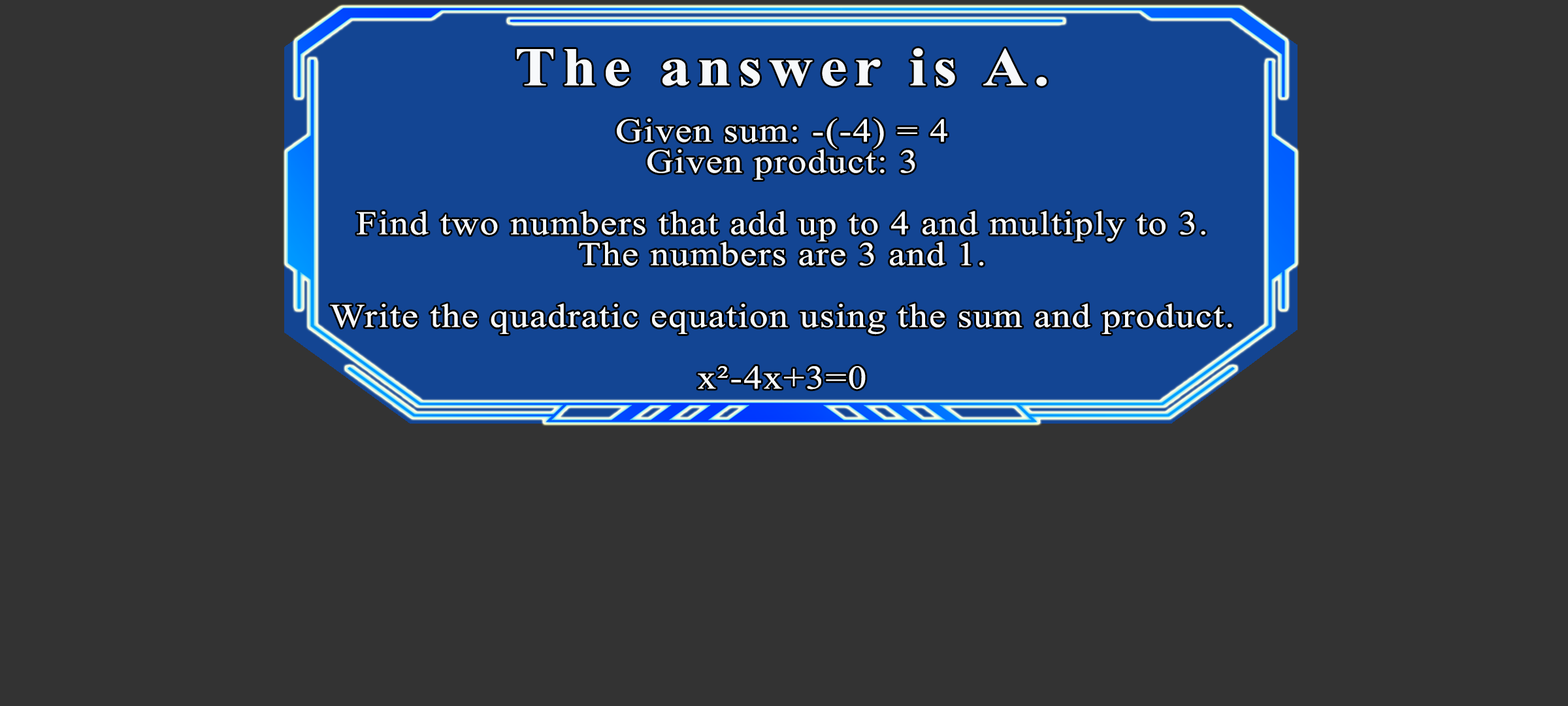
<style>
.page{position:relative;width:1568px;height:706px;background:#333333}
.page>*{position:absolute;margin:0}
.t1{font:54.4px "TimesNewRomanPS-BoldMT";letter-spacing:0.115em;color:#f7f9fb;scale:1.12 1}
.t2{font:33.2px/30.9px "TimesNewRomanPSMT";letter-spacing:0.035em;color:#f7f9fb;scale:1.12 1}
</style>
<div class="page">
<p class="t1" style="left:517px;top:48px;width:530px;height:38px">The answer is A.</p>
<p class="t2" style="left:330px;top:118px;width:902px;height:271px;text-align:center">Given sum: -(-4) = 4<br>Given product: 3<br><br>Find two numbers that add up to 4 and multiply to 3.<br>The numbers are 3 and 1.<br><br>Write the quadratic equation using the sum and product.<br><br>x²-4x+3=0</p>
</div>
